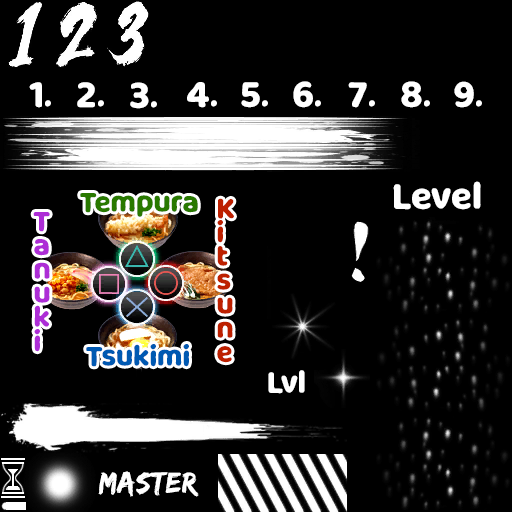
<style>
.page{position:relative;width:512px;height:512px;background:#000000}
.page>*{position:absolute;margin:0}
.t1{font:36px "MilkyNiceClean";color:#ffffff}
.t2{font:28px "MilkyNiceClean";color:#297900}
.t3{font:28px/24px "MilkyNiceClean";color:#bd2000}
.t4{font:28px/24px "MilkyNiceClean";color:#ad2dd6}
.t5{font:28px "MilkyNiceClean";color:#0059b2}
.t6{font:30px "MilkyNiceClean";color:#ffffff}
.t7{font:30px "EdoSZ";letter-spacing:0.03em;color:#ffffff}
</style>
<div class="page">
<p class="t1" style="left:29px;top:82px;width:22px;height:26px">1.</p>
<p class="t1" style="left:77px;top:82px;width:27px;height:26px">2.</p>
<p class="t1" style="left:130px;top:82px;width:27px;height:27px">3.</p>
<p class="t1" style="left:187px;top:82px;width:30px;height:26px">4.</p>
<p class="t1" style="left:241px;top:82px;width:27px;height:26px">5.</p>
<p class="t1" style="left:293px;top:81px;width:28px;height:27px">6.</p>
<p class="t1" style="left:348px;top:82px;width:27px;height:26px">7.</p>
<p class="t1" style="left:401px;top:81px;width:29px;height:27px">8.</p>
<p class="t1" style="left:454px;top:81px;width:28px;height:27px">9.</p>
<p class="t1" style="left:393px;top:181px;width:88px;height:29px">Level</p>
<p class="t2" style="left:80px;top:193px;width:118px;height:24px">Tempura</p>
<p class="t3" style="left:217px;top:198px;width:17px;height:165px">K<br>i<br>t<br>s<br>u<br>n<br>e</p>
<p class="t4" style="left:33px;top:212px;width:17px;height:140px">T<br>a<br>n<br>u<br>k<br>i</p>
<p class="t5" style="left:86px;top:344px;width:103px;height:23px">Tsukimi</p>
<p class="t6" style="left:268px;top:370px;width:37px;height:24px">Lvl</p>
<p class="t7" style="left:98px;top:471px;width:101px;height:26px">Master</p>
</div>
